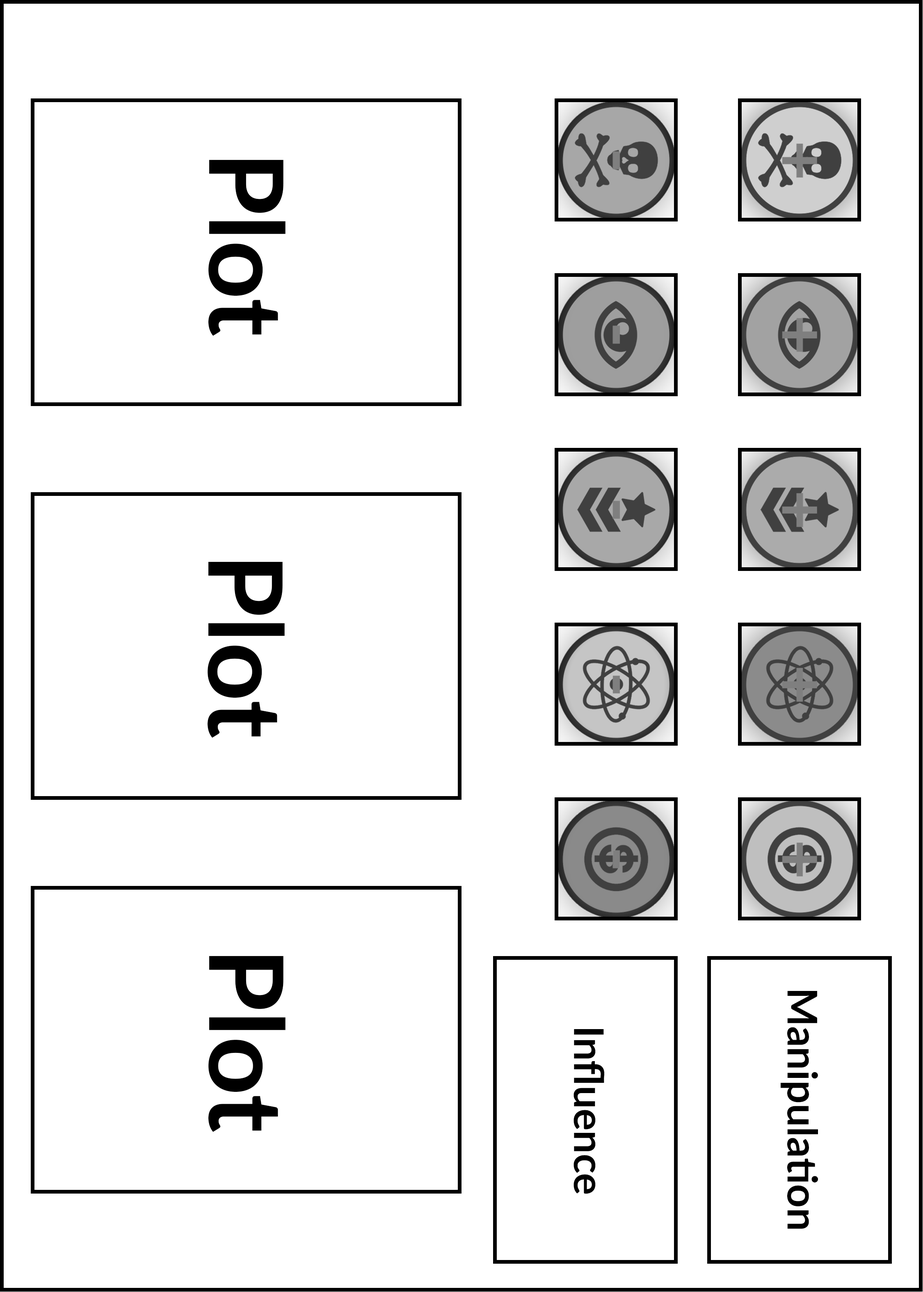
<style>
.page{position:relative;width:923px;height:1292px;background:#ffffff}
.page>*{position:absolute;margin:0}
.t1{font:102.5px "Lato-Bold";color:#000000}
.t2{font:41px "Lato-Bold";color:#000000}
</style>
<div class="page">
<p class="t1" style="left:208px;top:160px;width:77px;height:176px;rotate:90deg">Plot</p>
<p class="t1" style="left:208px;top:562px;width:77px;height:176px;rotate:90deg">Plot</p>
<p class="t1" style="left:208px;top:956px;width:77px;height:176px;rotate:90deg">Plot</p>
<p class="t2" style="left:781px;top:991px;width:37px;height:238px;rotate:90deg">Manipulation</p>
<p class="t2" style="left:573px;top:1029px;width:31px;height:165px;rotate:90deg">Influence</p>
</div>
